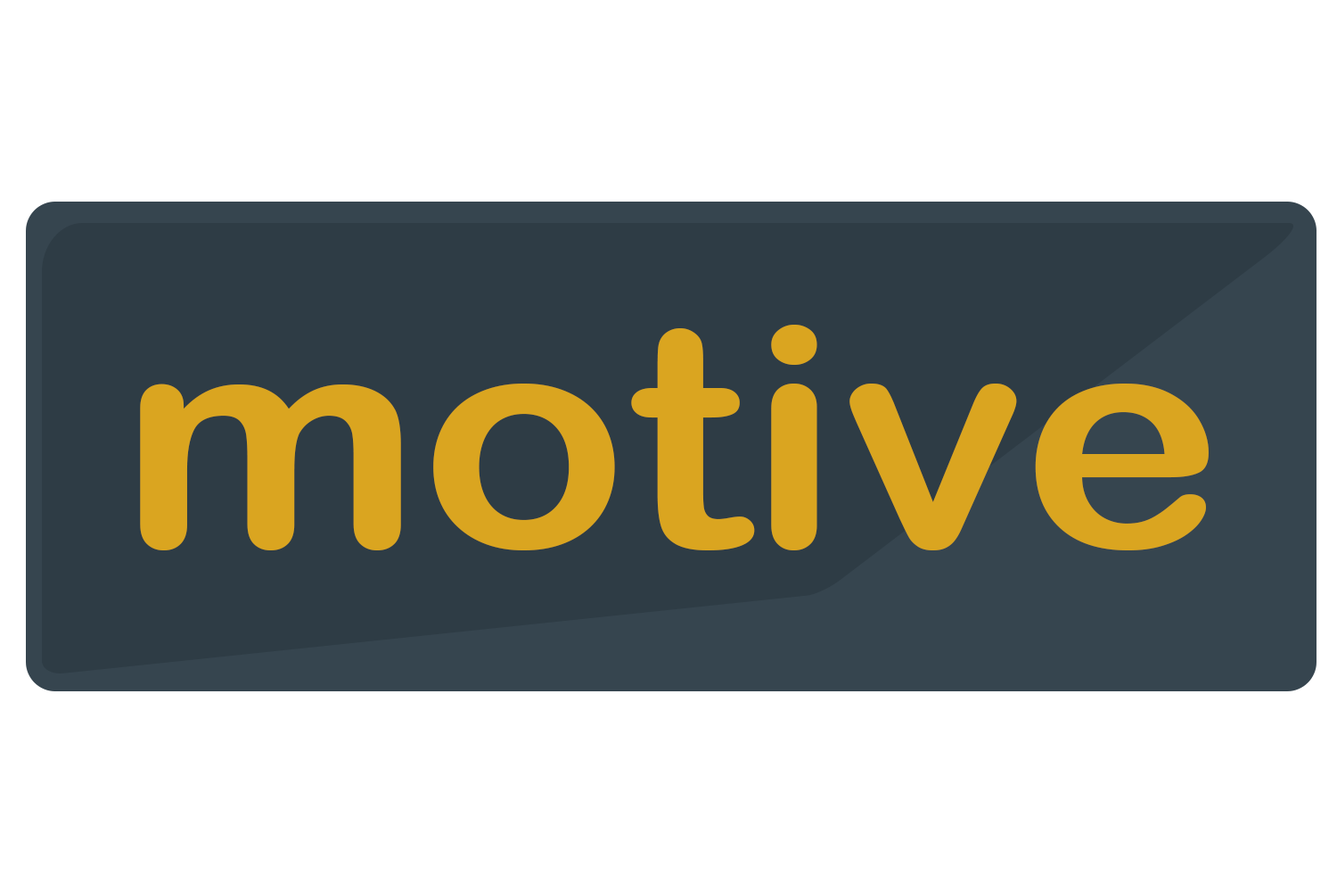
<style>
.page{position:relative;width:1337px;height:892px;background:#ffffff}
.page>*{position:absolute;margin:0}
.t1{font:308px "ArialRoundedMTBold";color:#daa520;scale:1.11 1}
</style>
<div class="page">
<p class="t1" style="left:140px;top:325px;width:1069px;height:225px">motive</p>
</div>
